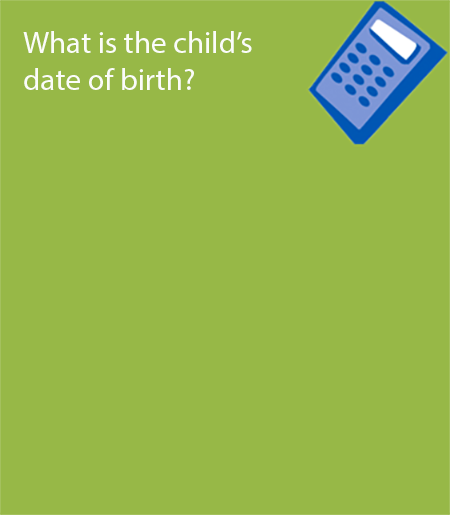
<style>
.page{position:relative;width:450px;height:515px;background:#97b847}
.page>*{position:absolute;margin:0}
.t1{font:30.9px "MyriadPro-Regular";color:#fbfcf9}
</style>
<div class="page">
<p class="t1" style="left:23px;top:31px;width:229px;height:59px">What is the child’s date of birth?</p>
</div>
